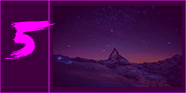
<style>
.page{position:relative;width:186px;height:93px;background:#400040}
.page>*{position:absolute;margin:0}
.t1{font:60px "LeviReBrushed";color:#ff00ff}
</style>
<div class="page">
<p class="t1" style="left:5px;top:20px;width:50px;height:40px">5</p>
</div>
